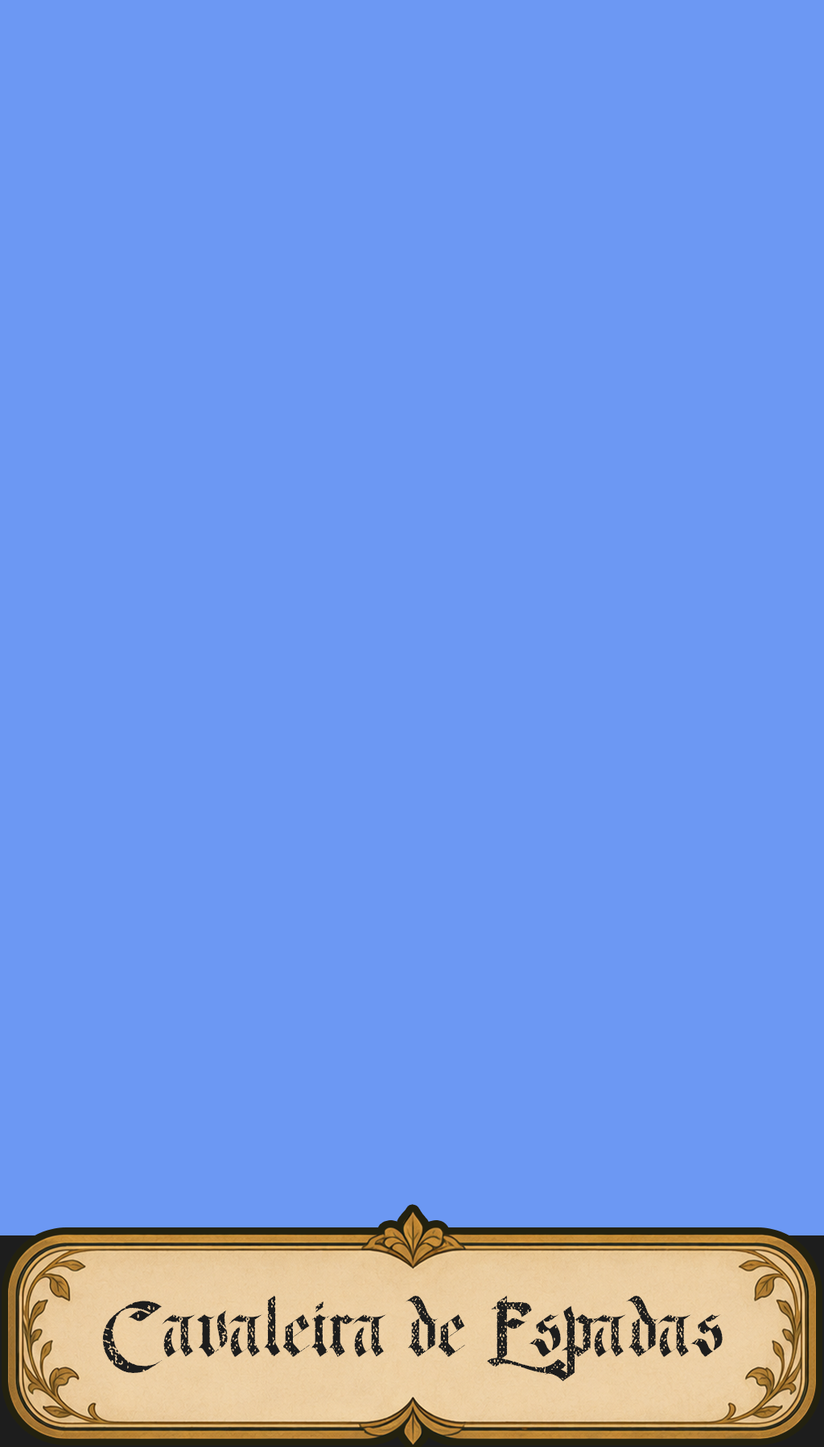
<style>
.page{position:relative;width:824px;height:1447px;background:#6c98f3}
.page>*{position:absolute;margin:0}
.t1{font:80.5px "DODavidGothic-Aged";color:#1d1d1d}
</style>
<div class="page">
<p class="t1" style="left:102px;top:1295px;width:620px;height:87px">Cavaleira de Espadas</p>
</div>
